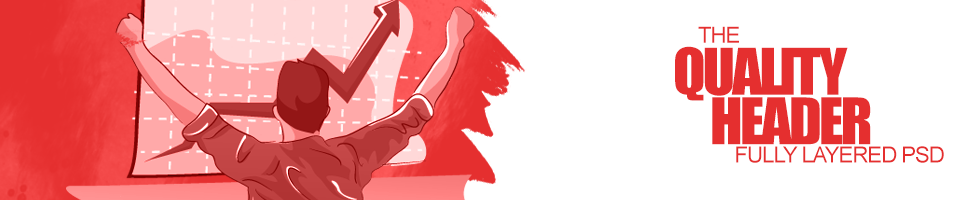
<style>
.page{position:relative;width:977px;height:200px;background:#ffffff}
.page>*{position:absolute;margin:0}
.t1{font:22.3px "ArialMT";letter-spacing:-0.05em;color:#e52f2f;text-transform:uppercase}
.t2{font:59.5px "Impact";letter-spacing:-0.05em;color:#e52f2f;text-transform:uppercase}
</style>
<div class="page">
<p class="t1" style="left:698px;top:26px;width:41px;height:17px">The</p>
<p class="t2" style="left:675px;top:46px;width:173px;height:55px">quality</p>
<p class="t2" style="left:712px;top:97px;width:159px;height:48px">header</p>
<p class="t1" style="left:736px;top:146px;width:208px;height:17px">fully layered psd</p>
</div>
